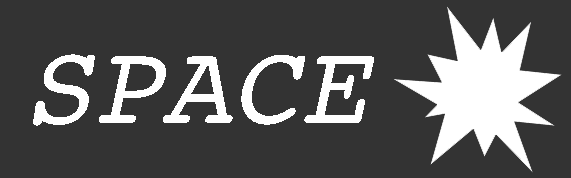
<style>
.page{position:relative;width:571px;height:178px;background:#333333}
.page>*{position:absolute;margin:0}
.t1{font:115px "Courier-Oblique";color:#ffffff}
</style>
<div class="page">
<p class="t1" style="left:33px;top:54px;width:341px;height:72px">SPACE</p>
</div>
